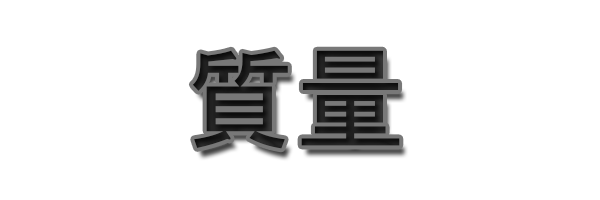
<style>
.page{position:relative;width:600px;height:200px;background:#ffffff}
.page>*{position:absolute;margin:0}
.t1{font:110px "MS-Gothic";color:#171717}
</style>
<div class="page">
<p class="t1" style="left:192px;top:50px;width:208px;height:99px">質量</p>
</div>
